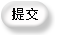
<style>
.page{position:relative;width:63px;height:43px;background:#ffffff}
.page>*{position:absolute;margin:0}
.t1{font:14px "SimHei";color:#060606}
</style>
<div class="page">
<p class="t1" style="left:12px;top:8px;width:26px;height:12px">提交</p>
</div>
